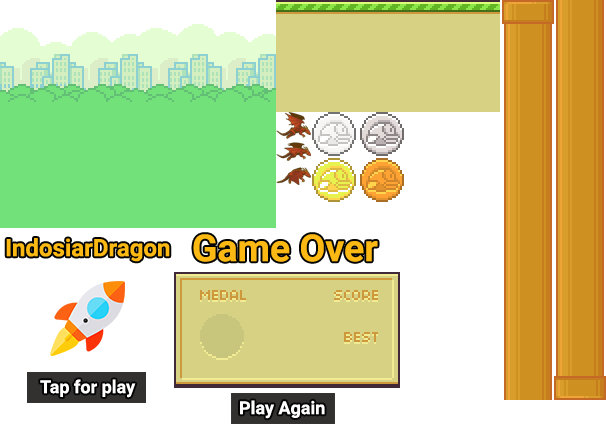
<style>
.page{position:relative;width:606px;height:428px;background:#ffffff}
.page>*{position:absolute;margin:0}
.t1{font:24px "Roboto-Bold";color:#fdb913}
.t2{font:37.4px "Roboto-Bold";color:#fdb913}
.t3{font:18px "Roboto-Bold";color:#ffffff}
</style>
<div class="page">
<p class="t1" style="left:6px;top:238px;width:164px;height:24px">IndosiarDragon</p>
<p class="t2" style="left:193px;top:234px;width:185px;height:28px">Game Over</p>
<p class="t3" style="left:40px;top:379px;width:96px;height:19px">Tap for play</p>
<p class="t3" style="left:240px;top:400px;width:85px;height:19px">Play Again</p>
</div>
